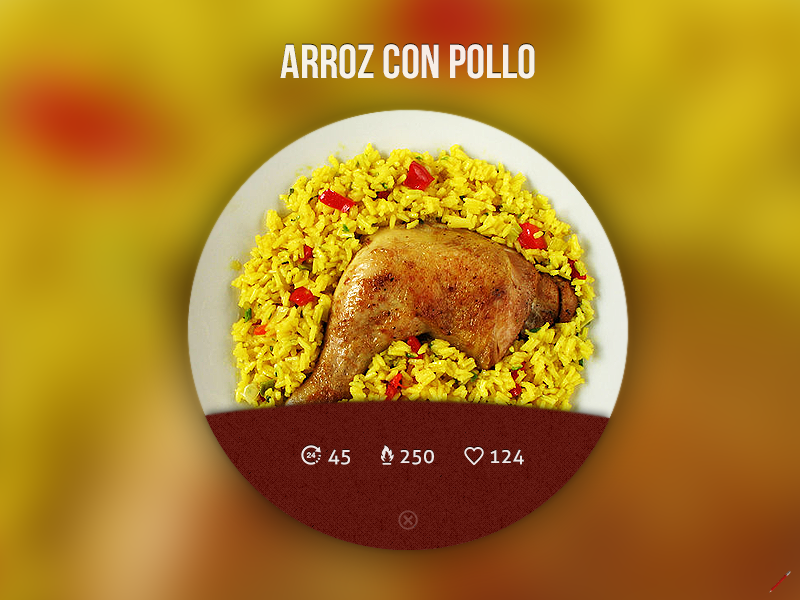
<style>
.page{position:relative;width:800px;height:600px}
.page>*{position:absolute;margin:0}
.t1{font:47.6px "BebasNeue";color:#fffefe}
.t2{font:20px "Aller";color:#ffffff}
</style>
<div class="page">
<p class="t1" style="left:280px;top:44px;width:255px;height:35px">Arroz con Pollo</p>
<p class="t2" style="left:328px;top:449px;width:22px;height:16px">45</p>
<p class="t2" style="left:490px;top:449px;width:34px;height:16px">124</p>
<p class="t2" style="left:400px;top:450px;width:34px;height:15px">250</p>
</div>
